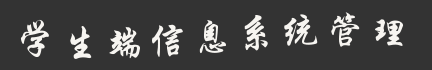
<style>
.page{position:relative;width:432px;height:70px;background:#333333}
.page>*{position:absolute;margin:0}
.t1{font:40px "STXingkai";letter-spacing:0.1em;color:#f7f5f1}
</style>
<div class="page">
<p class="t1" style="left:20px;top:12px;width:384px;height:47px">学生端信息系统管理</p>
</div>
